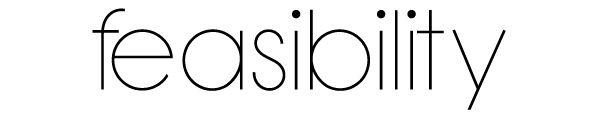
<style>
.page{position:relative;width:600px;height:120px;background:#ffffff}
.page>*{position:absolute;margin:0}
.t1{font:79.2px "BondoluoPeek";color:#000000}
</style>
<div class="page">
<p class="t1" style="left:92px;top:8px;width:414px;height:102px">feasibility</p>
</div>
